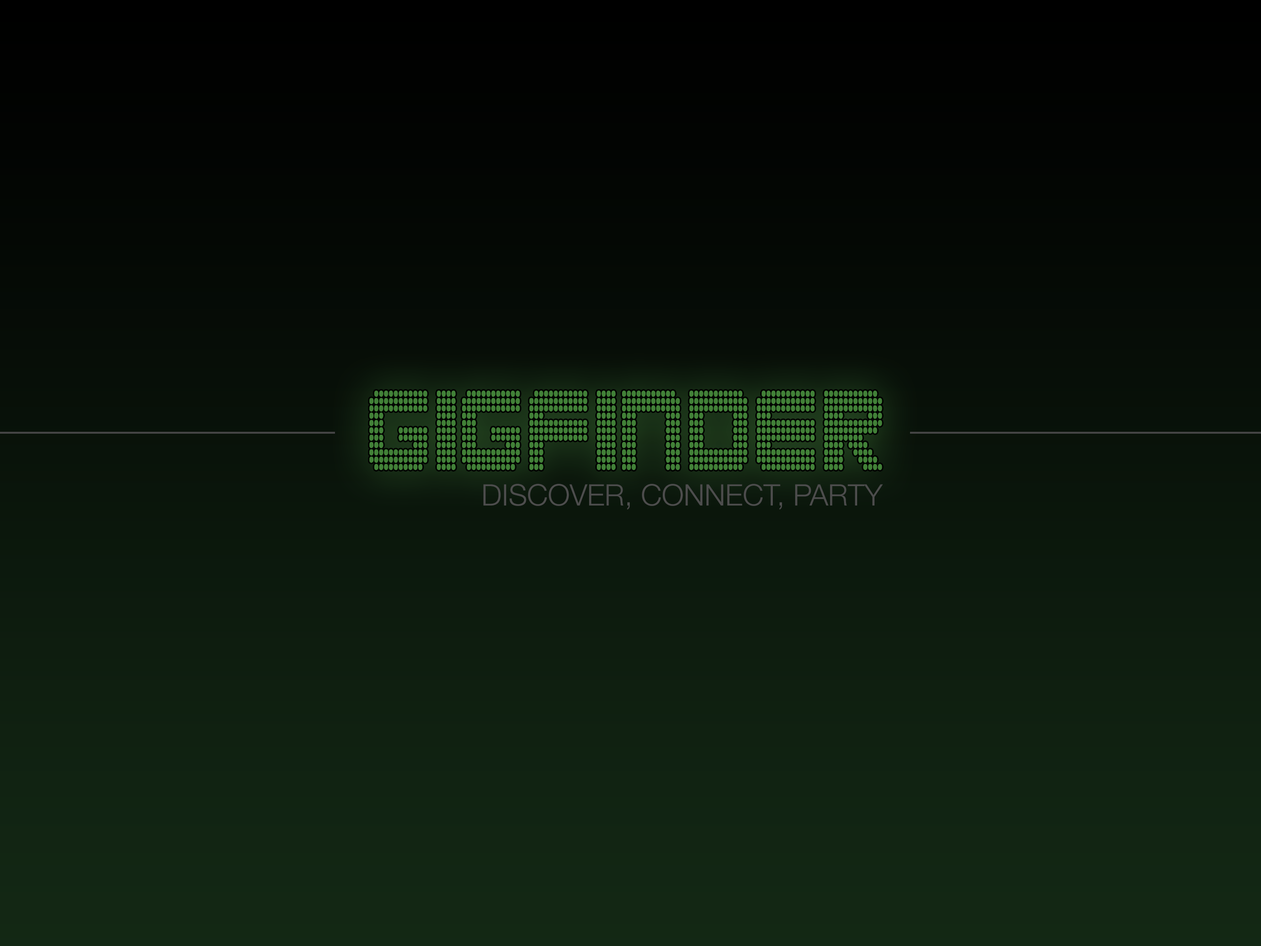
<style>
.page{position:relative;width:1261px;height:946px}
.page>*{position:absolute;margin:0}
.t1{font:129.3px "Clubland";color:#428138;text-transform:uppercase;scale:0.67 1}
.t2{font:29.6px "HelveticaNeue-Light";color:#4d4d4d;text-transform:uppercase}
</style>
<div class="page">
<p class="t1" style="left:369px;top:390px;width:513px;height:80px">GigFinder</p>
<p class="t2" style="left:483px;top:483px;width:400px;height:27px">Discover, Connect, Party</p>
</div>
